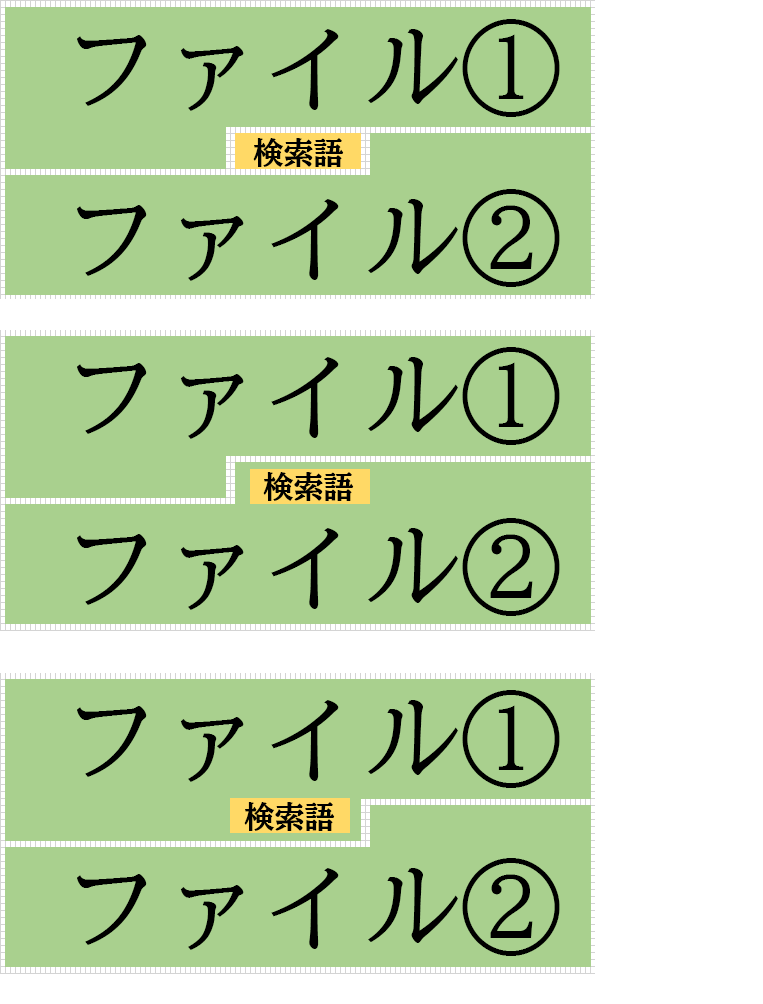
<style>
.page{position:relative;width:763px;height:1004px;background:#a9d08e}
.page>*{position:absolute;margin:0}
.t1{font:100px "BIZ-UDMincho-Medium";color:#000000}
.t2{font:30px "BIZUDMincho-Bold";color:#000000}
</style>
<div class="page">
<p class="t1" style="left:77px;top:19px;width:483px;height:98px">ファイル①</p>
<p class="t2" style="left:253px;top:138px;width:91px;height:29px">検索語</p>
<p class="t1" style="left:77px;top:189px;width:483px;height:98px">ファイル②</p>
<p class="t1" style="left:77px;top:347px;width:483px;height:98px">ファイル①</p>
<p class="t2" style="left:263px;top:472px;width:91px;height:29px">検索語</p>
<p class="t1" style="left:77px;top:518px;width:483px;height:98px">ファイル②</p>
<p class="t1" style="left:77px;top:690px;width:483px;height:98px">ファイル①</p>
<p class="t2" style="left:244px;top:802px;width:91px;height:29px">検索語</p>
<p class="t1" style="left:77px;top:858px;width:483px;height:98px">ファイル②</p>
</div>
